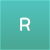
<style>
.page{position:relative;width:50px;height:50px}
.page>*{position:absolute;margin:0}
.t1{font:17.8px "MaplestoryLight";color:#ffffff}
</style>
<div class="page">
<p class="t1" style="left:20px;top:17px;width:11px;height:14px">R</p>
</div>
